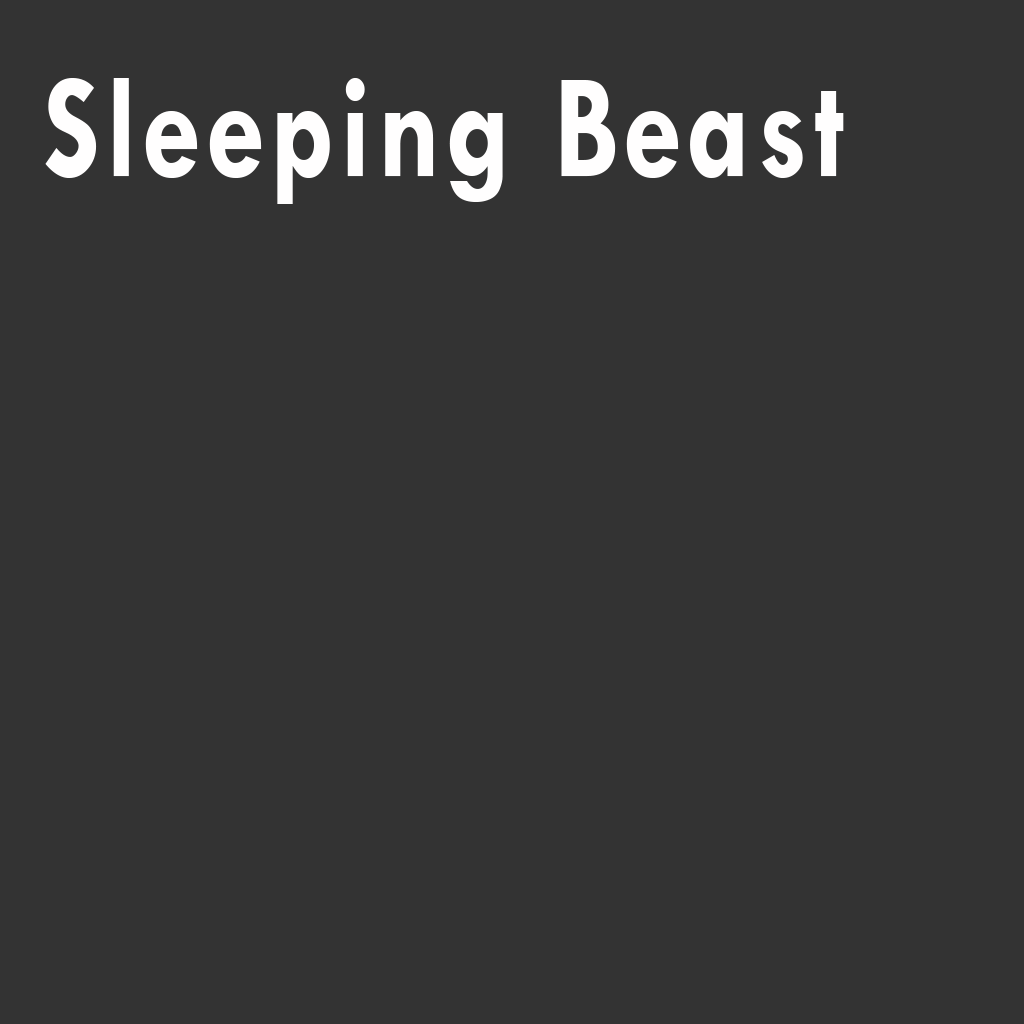
<style>
.page{position:relative;width:1024px;height:1024px;background:#333333}
.page>*{position:absolute;margin:0}
.t1{font:150px "TwCenMT-Bold";letter-spacing:0.05em;color:#fffefe;scale:0.8 1}
</style>
<div class="page">
<p class="t1" style="left:45px;top:78px;width:799px;height:126px">Sleeping Beast</p>
</div>
